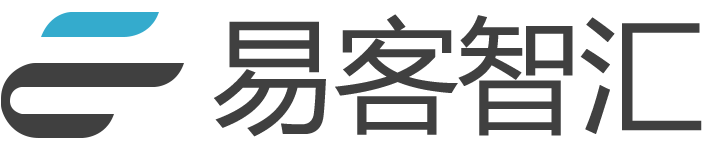
<style>
.page{position:relative;width:703px;height:150px;background:#ffffff}
.page>*{position:absolute;margin:0}
.t1{font:124px "MicrosoftYaHeiUI";letter-spacing:-0.01em;color:#404040}
</style>
<div class="page">
<p class="t1" style="left:214px;top:14px;width:488px;height:123px">易客智汇</p>
</div>
